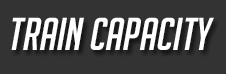
<style>
.page{position:relative;width:226px;height:74px;background:#333333}
.page>*{position:absolute;margin:0}
.t1{font:45px "BigNoodleTitling";color:#ffffff;font-style:italic}
</style>
<div class="page">
<p class="t1" style="left:11px;top:17px;width:203px;height:33px">train Capacity</p>
</div>
